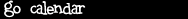
<style>
.page{position:relative;width:188px;height:19px;background:#000000}
.page>*{position:absolute;margin:0}
.t1{font:20px "Blackboysonmopeds";color:#ffffff}
</style>
<div class="page">
<p class="t1" style="left:4px;top:0px;width:82px;height:18px">go calendar</p>
</div>
